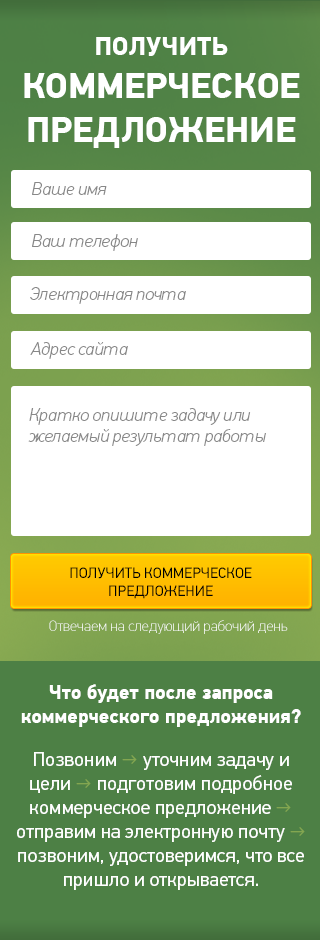
<style>
.page{position:relative;width:320px;height:940px;background:#ffffff}
.page>*{position:absolute;margin:0}
.t1{font:36px "PFDinTextPro-Bold";color:#ffffff;text-transform:uppercase}
.t2{font:26px "PFDinTextPro-Bold";color:#ffffff;text-transform:uppercase}
.t3{font:18px "PFDinTextPro-ThinItalic";color:#888888}
.t4{font:15px "PFDinTextPro-Regular";color:#020202;text-transform:uppercase}
.t5{font:15px "PFDinTextPro-Thin";color:#ffffff}
.t6{font:20px "PFDinTextPro-Bold";color:#ffffff}
.t7{font:20px "PFDinTextPro-Regular";color:#ffffff}
.t8{font:20px "PFDinTextPro-Regular";color:#83a650}
</style>
<div class="page">
<p class="t1" style="left:24px;top:37px;width:276px;height:111px;text-align:center"><span class="t2">получить<br></span>коммерческое предложение</p>
<p class="t3" style="left:32px;top:182px;width:75px;height:13px">Ваше имя</p>
<p class="t3" style="left:32px;top:234px;width:106px;height:17px">Ваш телефон</p>
<p class="t3" style="left:30px;top:287px;width:156px;height:17px">Электронная почта</p>
<p class="t3" style="left:30px;top:342px;width:98px;height:17px">Адрес сайта</p>
<p class="t3" style="left:28px;top:408px;width:238px;height:38px">Кратко опишите задачу или желаемый результат работы</p>
<p class="t4" style="left:70px;top:567px;width:182px;height:32px;text-align:center">получить коммерческое<br>предложение</p>
<p class="t5" style="left:49px;top:620px;width:239px;height:14px">Отвечаем на следующий рабочий день</p>
<p class="t6" style="left:21px;top:684px;width:280px;height:43px;text-align:center">Что будет после запроса коммерческого предложения?</p>
<p class="t7" style="left:17px;top:752px;width:288px;height:138px;text-align:center">Позвоним<span class="t8"> → </span>уточним задачу и цели<span class="t8"> → </span>подготовим подробное коммерческое предложение<span class="t8"> → </span>отправим на электронную почту<span class="t8"> → </span>позвоним, удостоверимся, что все пришло и открывается.</p>
</div>
